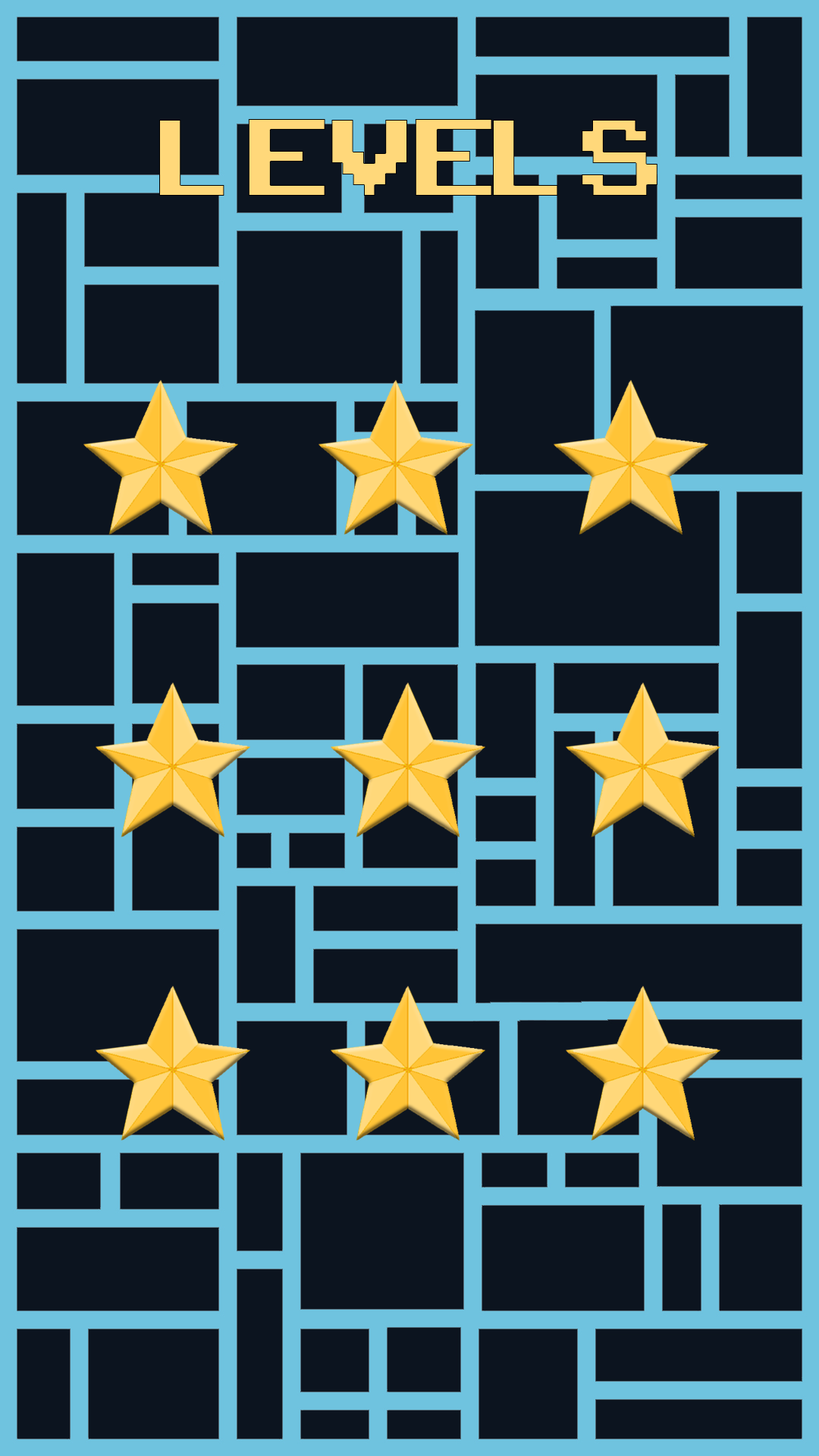
<style>
.page{position:relative;width:819px;height:1456px;background:#0c141f}
.page>*{position:absolute;margin:0}
.t1{font:151.7px "ArcadeClassic";color:#ffd87a}
</style>
<div class="page">
<p class="t1" style="left:159px;top:119px;width:498px;height:77px">Levels</p>
</div>
